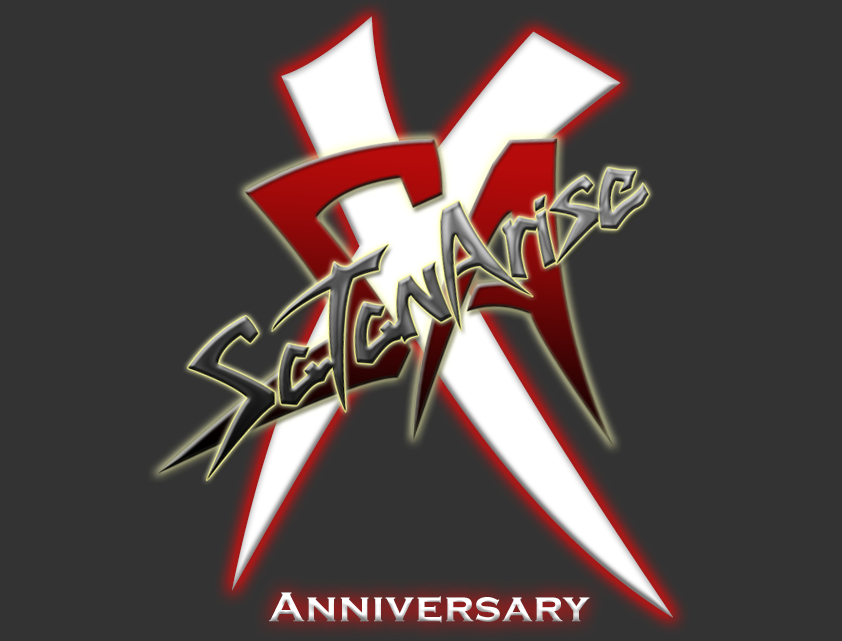
<style>
.page{position:relative;width:842px;height:641px;background:#333333}
.page>*{position:absolute;margin:0}
.t1{font:435.7px "savatage";letter-spacing:0.025em}
.t2{font:43.3px "CopperplateGothic-Bold";letter-spacing:0.025em;color:#ffffff}
</style>
<div class="page">
<p class="t1" style="left:232px;top:16px;width:441px;height:602px">X</p>
<p class="t2" style="left:269px;top:592px;width:321px;height:31px">Anniversary</p>
</div>
